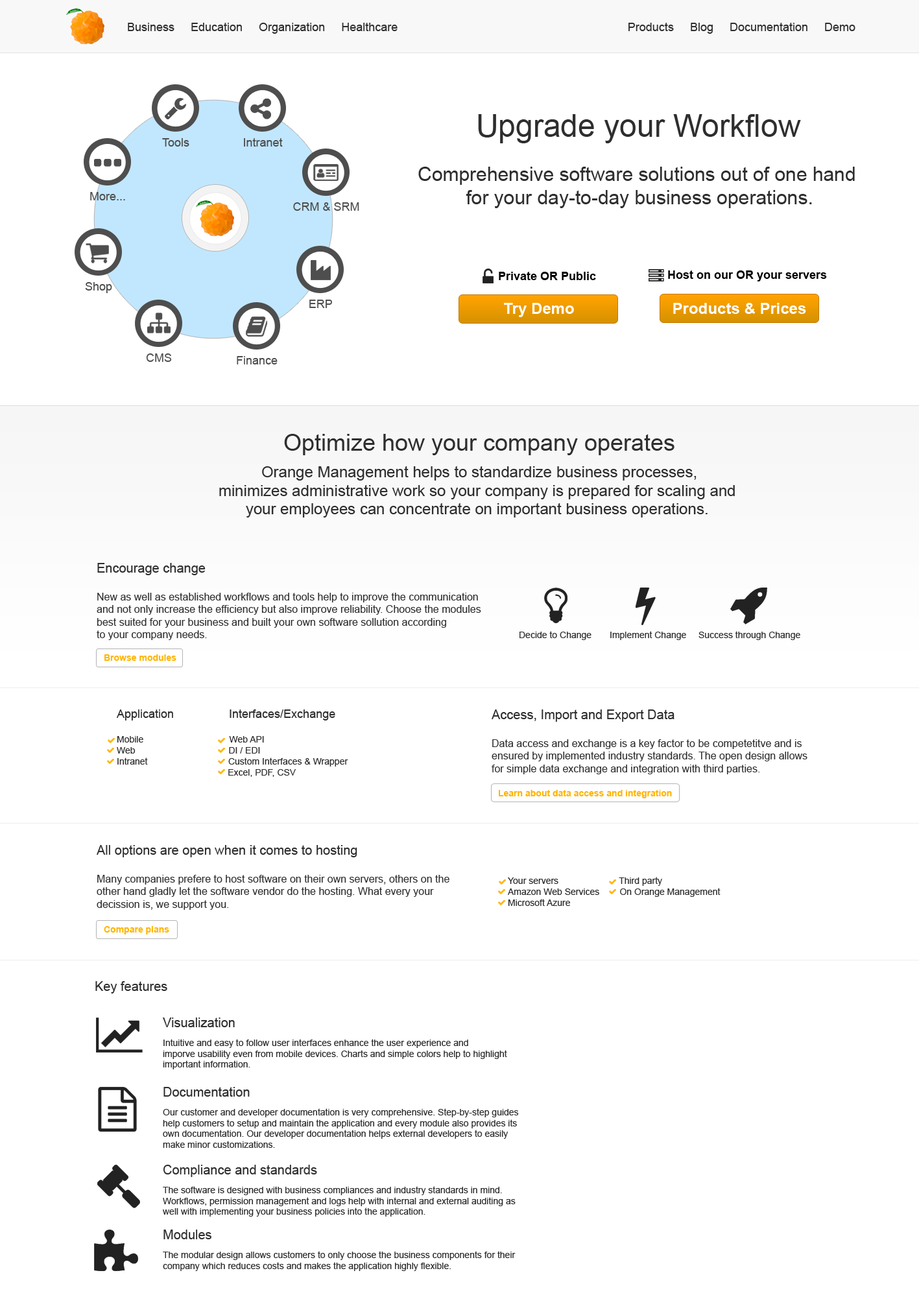
<style>
.page{position:relative;width:919px;height:1297px;background:#ffffff}
.page>*{position:absolute;margin:0}
.t1{font:11.7px "ArialMT";color:#2e2e2e}
.t2{font:31.1px "ArialMT";color:#2e2e2e}
.t3{font:11.7px "ArialMT";color:#4e4e4e}
.t4{font:19.5px "ArialMT";color:#2e2e2e}
.t5{font:11.7px "Arial-BoldMT";color:#000000}
.t6{font:15.6px "Arial-BoldMT";color:#ffffff}
.t7{font:15.6px "ArialMT";color:#2e2e2e}
.t8{font:23.4px "ArialMT";color:#2e2e2e}
.t9{font:10.4px "ArialMT";color:#2e2e2e}
.t10{font:13px "ArialMT";color:#2e2e2e}
.t11{font:9.1px "ArialMT";color:#2e2e2e}
.t12{font:9.1px "Arial-BoldMT";color:#ffb400}
</style>
<div class="page">
<p class="t1" style="left:128px;top:23px;width:270px;height:11px">Business     Education     Organization     Healthcare</p>
<p class="t1" style="left:629px;top:23px;width:227px;height:11px">Products     Blog     Documentation     Demo</p>
<p class="t2" style="left:478px;top:114px;width:323px;height:29px">Upgrade your Workflow</p>
<p class="t3" style="left:162px;top:138px;width:27px;height:9px">Tools</p>
<p class="t3" style="left:244px;top:138px;width:39px;height:9px">Intranet</p>
<p class="t4" style="left:418px;top:167px;width:437px;height:41px;text-align:center">Comprehensive software solutions out of one hand <br>for your day-to-day business operations.</p>
<p class="t3" style="left:90px;top:192px;width:35px;height:8px">More...</p>
<p class="t3" style="left:293px;top:202px;width:66px;height:9px">CRM &amp; SRM</p>
<p class="t5" style="left:499px;top:272px;width:97px;height:8px">Private OR Public</p>
<p class="t5" style="left:668px;top:270px;width:159px;height:12px">Host on our OR your servers</p>
<p class="t3" style="left:85px;top:282px;width:27px;height:11px">Shop</p>
<p class="t3" style="left:309px;top:300px;width:23px;height:8px">ERP</p>
<p class="t6" style="left:504px;top:303px;width:70px;height:14px">Try Demo</p>
<p class="t6" style="left:673px;top:303px;width:133px;height:11px">Products &amp; Prices</p>
<p class="t3" style="left:146px;top:354px;width:26px;height:8px">CMS</p>
<p class="t3" style="left:237px;top:356px;width:41px;height:9px">Finance</p>
<p class="t7" style="left:219px;top:434px;width:516px;height:84px;text-align:center"><span class="t8">Optimize how your company operates<br><br></span>Orange Management helps to standardize business processes,<br>minimizes administrative work so your company is prepared for scaling and <br>your employees can concentrate on important business operations.</p>
<p class="t9" style="left:97px;top:563px;width:384px;height:77px"><span class="t10">Encourage change<br><br></span>New as well as established workflows and tools help to improve the communication <br>and not only increase the efficiency but also improve reliability. Choose the modules<br>best suited for your business and built your own software sollution according <br>to your company needs.</p>
<p class="t11" style="left:520px;top:631px;width:72px;height:9px">Decide to Change</p>
<p class="t11" style="left:610px;top:631px;width:76px;height:9px">Implement Change</p>
<p class="t11" style="left:699px;top:631px;width:101px;height:9px">Success through Change</p>
<p class="t12" style="left:104px;top:654px;width:72px;height:7px">Browse modules</p>
<p class="t11" style="left:116px;top:710px;width:232px;height:67px"><span class="t1">Application                 Interfaces/Exchange<br><br></span>Mobile                                  Web API      <br>Web                                     DI / EDI<br>Intranet                                Custom Interfaces &amp; Wrapper<br>                                            Excel, PDF, CSV</p>
<p class="t9" style="left:492px;top:710px;width:316px;height:64px"><span class="t10">Access, Import and Export Data<br><br></span>Data access and exchange is a key factor to be competetitve and is <br>ensured by implemented industry standards. The open design allows <br>for simple data exchange and integration with third parties.</p>
<p class="t12" style="left:499px;top:790px;width:173px;height:9px">Learn about data access and integration</p>
<p class="t9" style="left:97px;top:845px;width:353px;height:65px"><span class="t10">All options are open when it comes to hosting<br><br></span>Many companies prefere to host software on their own servers, others on the <br>other hand gladly let the software vendor do the hosting. What every your <br>decission is, we support you.</p>
<p class="t11" style="left:508px;top:877px;width:213px;height:29px">Your servers                        Third party<br>Amazon Web Services        On Orange Management<br>Microsoft Azure</p>
<p class="t12" style="left:104px;top:926px;width:65px;height:9px">Compare plans</p>
<p class="t10" style="left:95px;top:981px;width:72px;height:13px">Key features</p>
<p class="t11" style="left:163px;top:1018px;width:344px;height:52px"><span class="t10">Visualization<br> <br></span>Intuitive and easy to follow user interfaces enhance the user experience and <br>imporve usability even from mobile devices. Charts and simple colors help to highlight <br>important information.</p>
<p class="t11" style="left:163px;top:1087px;width:356px;height:61px"><span class="t10">Documentation<br> <br></span>Our customer and developer documentation is very comprehensive. Step-by-step guides <br>help customers to setup and maintain the application and every module also provides its<br>own documentation. Our developer documentation helps external developers to easily <br>make minor customizations.</p>
<p class="t11" style="left:163px;top:1165px;width:353px;height:52px"><span class="t10">Compliance and standards<br> <br></span>The software is designed with business compliances and industry standards in mind. <br>Workflows, permission management and logs help with internal and external auditing as <br>well with implementing your business policies into the application.</p>
<p class="t11" style="left:163px;top:1230px;width:353px;height:41px"><span class="t10">Modules<br> <br></span>The modular design allows customers to only choose the business components for their <br>company which reduces costs and makes the application highly flexible.</p>
</div>
